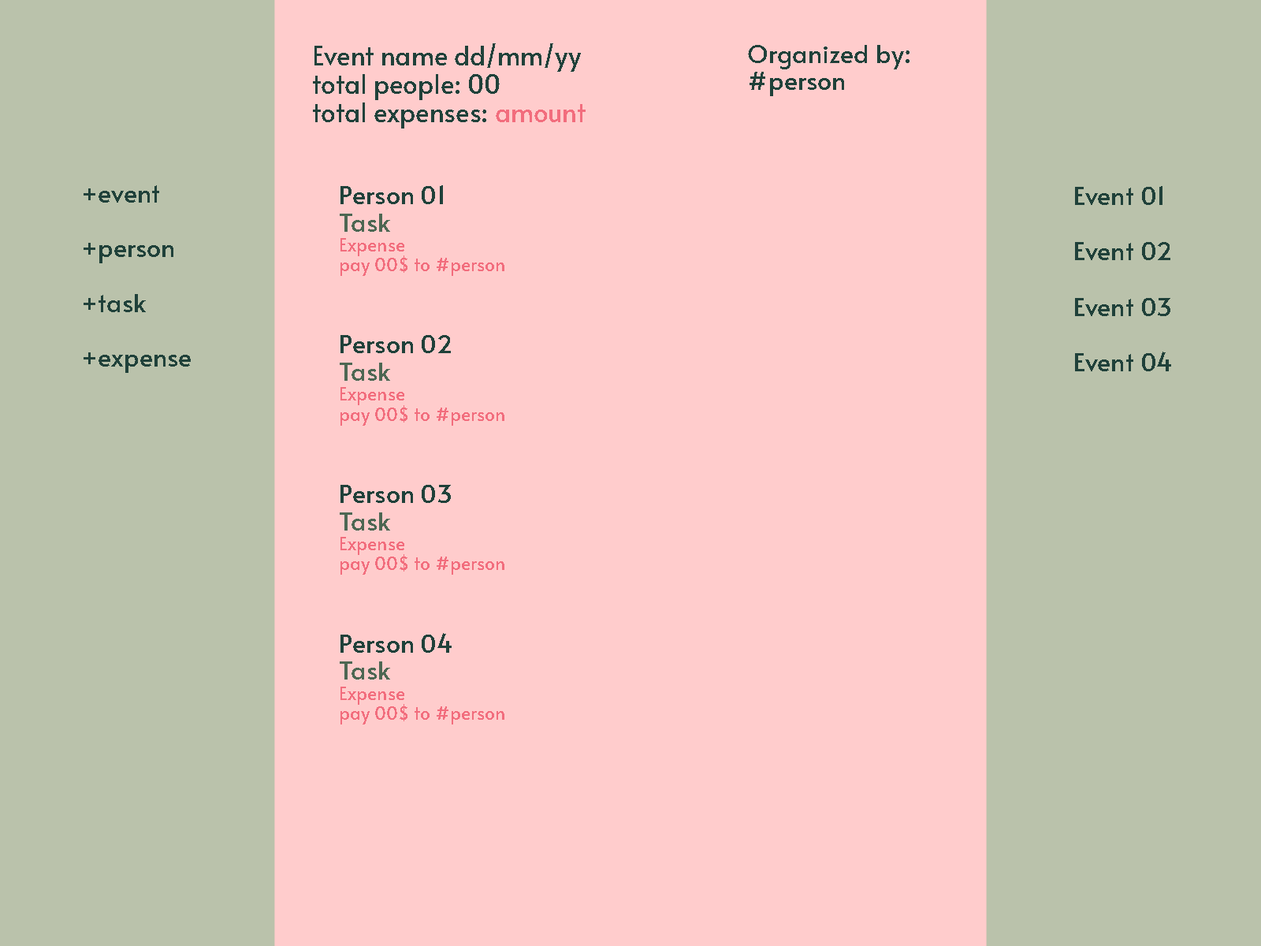
<style>
.page{position:relative;width:1261px;height:946px;background:#ffcccc}
.page>*{position:absolute;margin:0}
.t1{font:26px "Alata-Regular";color:#20413a}
.t2{font:26px "Alata-Regular";color:#f26d7d}
.t3{font:25.1px "Alata-Regular";color:#20413a}
.t4{font:18.2px "Alata-Regular";color:#f26d7d}
.t5{font:25.1px "Alata-Regular";color:#4d6753}
.t6{font:25.5px "Alata-Regular";color:#20413a}
</style>
<div class="page">
<p class="t1" style="left:313px;top:43px;width:273px;height:85px">Event name dd/mm/yy <br>total people: 00     <br>total expenses: <span class="t2">amount</span></p>
<p class="t3" style="left:748px;top:45px;width:161px;height:51px">Organized by:<br>#person</p>
<p class="t3" style="left:84px;top:185px;width:107px;height:188px">+event<br><br>+person<br><br>+task<br><br>+expense</p>
<p class="t4" style="left:340px;top:185px;width:164px;height:539px"><span class="t3">Person 01 <br></span><span class="t5">Task<br></span>Expense<br>pay 00$ to #person<br><br><br><span class="t3">Person 02<br></span><span class="t5">Task<br></span>Expense<br>pay 00$ to #person<br><br><br><span class="t3">Person 03<br></span><span class="t5">Task<br></span>Expense<br>pay 00$ to #person<br><br><br><span class="t3">Person 04<br></span><span class="t5">Task<br></span>Expense<br>pay 00$ to #person</p>
<p class="t6" style="left:1075px;top:186px;width:96px;height:185px">Event 01<br><br>Event 02<br><br>Event 03<br><br>Event 04</p>
</div>
